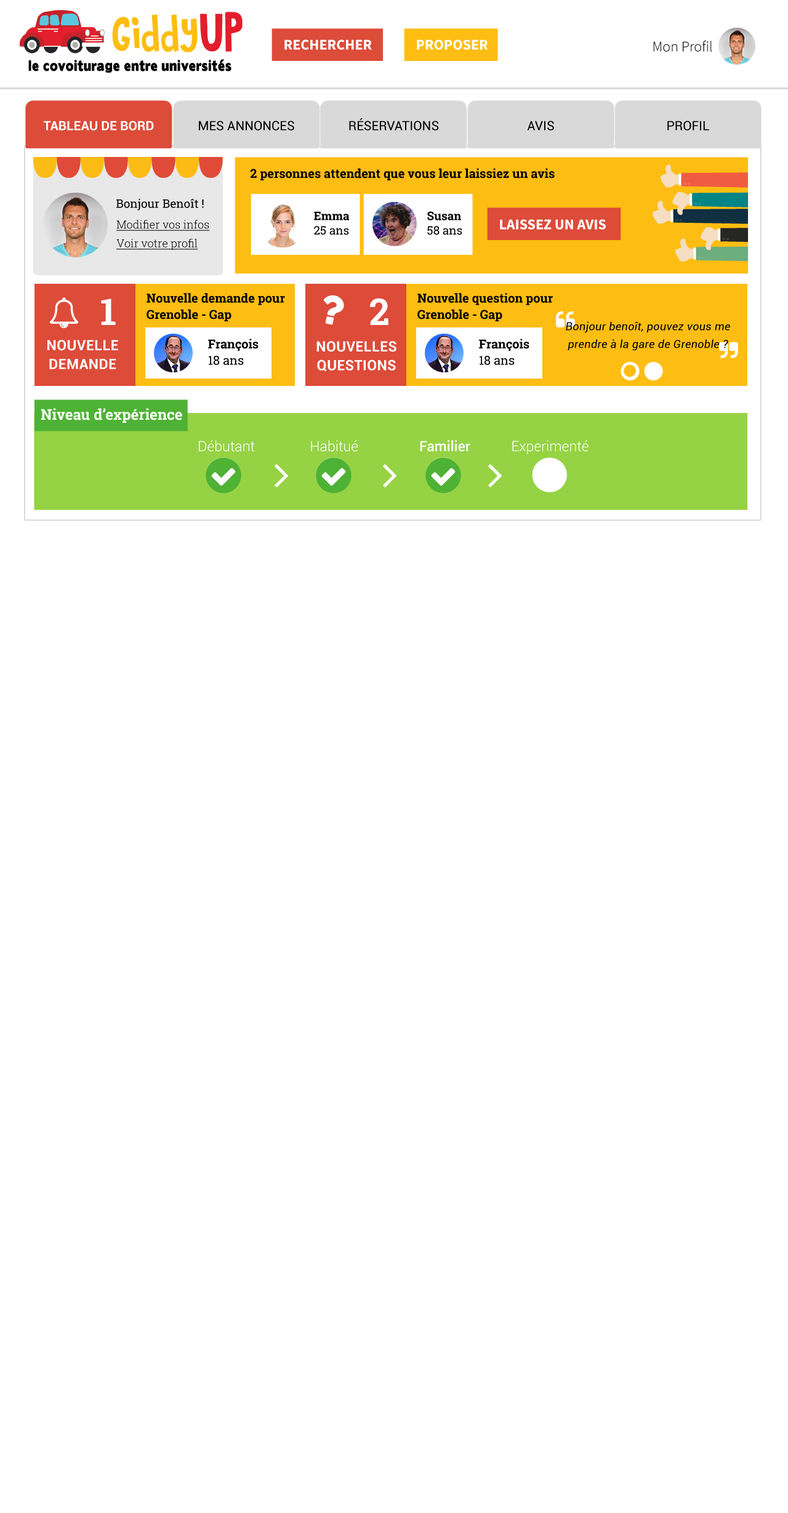
<style>
.page{position:relative;width:788px;height:1513px;background:#ffffff}
.page>*{position:absolute;margin:0}
.t1{font:14.8px "SourceSansPro-Bold";color:#ffffff;text-transform:uppercase}
.t2{font:14.8px "SourceSansPro-Light";color:#000000}
.t3{font:12.9px "Roboto-Bold";color:#ffffff;text-transform:uppercase}
.t4{font:12.9px "Roboto-Regular";color:#000000;text-transform:uppercase}
.t5{font:12.3px "RobotoSlab-Bold";color:#000000}
.t6{font:11.7px "RobotoSlab-Regular";color:#000000}
.t7{font:11.1px/18.8px "RobotoSlab-Light";color:#000000;text-decoration:underline}
.t8{font:11.7px/14.5px "RobotoSlab-Regular";color:#000000}
.t9{font:11.7px/14.5px "RobotoSlab-Bold";color:#000000}
.t10{font:12.3px/16.3px "RobotoSlab-Bold";color:#000000}
.t11{font:36.9px "RobotoSlab-Bold";color:#ffffff;text-transform:uppercase}
.t12{font:11.1px/17.6px "Roboto-Italic";letter-spacing:0.02em;color:#000000}
.t13{font:14.2px/18.8px "Roboto-Bold";letter-spacing:0.02em;color:#ffffff;text-transform:uppercase}
.t14{font:12.3px/16.3px "RobotoSlab-Regular";color:#000000}
.t15{font:14.8px "RobotoSlab-Bold";color:#ffffff}
.t16{font:14.2px "Roboto-Light";color:#ffffff}
.t17{font:14.2px "Roboto-Medium";color:#ffffff}
</style>
<div class="page">
<p class="t1" style="left:284px;top:39px;width:88px;height:11px">Rechercher</p>
<p class="t1" style="left:417px;top:39px;width:71px;height:11px">proposer</p>
<p class="t2" style="left:653px;top:41px;width:59px;height:11px">Mon Profil</p>
<p class="t3" style="left:43px;top:121px;width:111px;height:10px">tableau de bord</p>
<p class="t4" style="left:199px;top:121px;width:95px;height:10px">mes annonces</p>
<p class="t4" style="left:349px;top:118px;width:90px;height:13px">réservations</p>
<p class="t4" style="left:527px;top:121px;width:27px;height:10px">avis</p>
<p class="t4" style="left:667px;top:121px;width:42px;height:10px">profil</p>
<p class="t5" style="left:250px;top:168px;width:305px;height:12px">2 personnes attendent que vous leur laissiez un avis</p>
<p class="t6" style="left:116px;top:199px;width:88px;height:12px">Bonjour Benoît !</p>
<p class="t7" style="left:116px;top:220px;width:94px;height:30px">Modifier vos infos<br>Voir votre profil</p>
<p class="t8" style="left:314px;top:212px;width:35px;height:23px"><span class="t9">Emma<br></span>25 ans</p>
<p class="t8" style="left:427px;top:211px;width:35px;height:24px"><span class="t9">Susan<br></span>58 ans</p>
<p class="t1" style="left:500px;top:219px;width:106px;height:11px">laissez un avis</p>
<p class="t10" style="left:147px;top:293px;width:138px;height:28px">Nouvelle demande pour<br>Grenoble - Gap</p>
<p class="t10" style="left:417px;top:293px;width:136px;height:28px">Nouvelle question pour<br>Grenoble - Gap</p>
<p class="t11" style="left:101px;top:299px;width:15px;height:26px">1</p>
<p class="t11" style="left:370px;top:298px;width:18px;height:27px">2</p>
<p class="t12" style="left:566px;top:321px;width:164px;height:29px;text-align:center">Bonjour benoît, pouvez vous me prendre à la gare de Grenoble ?</p>
<p class="t13" style="left:47px;top:340px;width:71px;height:29px;text-align:center">Nouvelle<br>demande</p>
<p class="t10" style="left:208px;top:339px;width:51px;height:26px">François<br><span class="t14">18 ans</span></p>
<p class="t13" style="left:316px;top:341px;width:80px;height:31px;text-align:center">Nouvelles<br>questions</p>
<p class="t10" style="left:479px;top:339px;width:50px;height:26px">François<br><span class="t14">18 ans</span></p>
<p class="t15" style="left:41px;top:408px;width:141px;height:15px">Niveau d’expérience</p>
<p class="t16" style="left:199px;top:440px;width:390px;height:14px">Débutant                Habitué   <span class="t17">Familier</span>   Experimenté</p>
</div>
